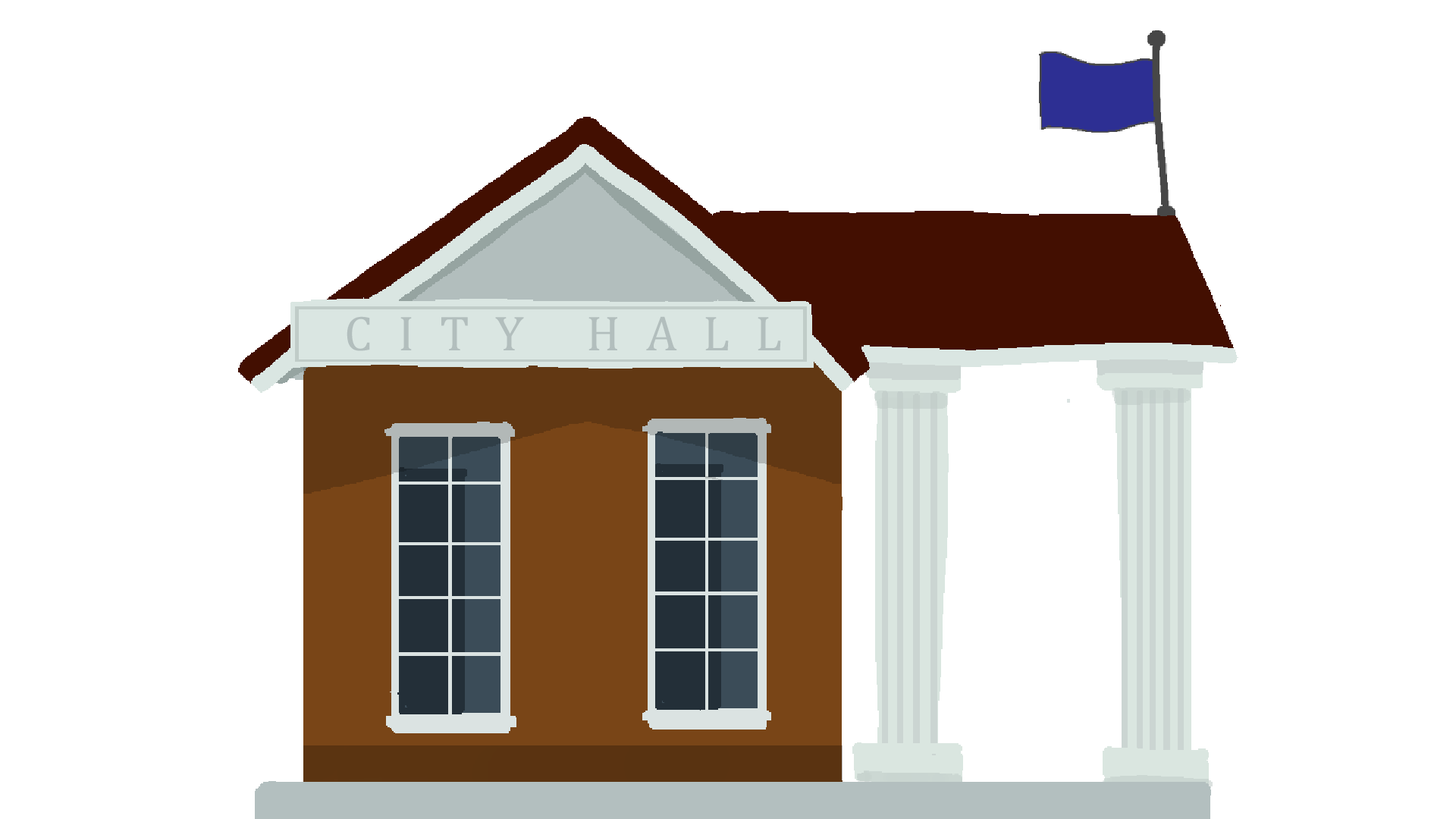
<style>
.page{position:relative;width:1456px;height:819px;background:#ffffff}
.page>*{position:absolute;margin:0}
.t1{font:49.6px "CambriaMath";letter-spacing:0.52em;color:#b2bebd}
</style>
<div class="page">
<p class="t1" style="left:347px;top:316px;width:434px;height:35px">CITY HALL</p>
</div>
